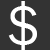
<style>
.page{position:relative;width:50px;height:50px;background:#333333}
.page>*{position:absolute;margin:0}
.t1{font:60px "FranklinGothic-Book";color:#ffffff}
</style>
<div class="page">
<p class="t1" style="left:8px;top:1px;width:29px;height:50px">$</p>
</div>
